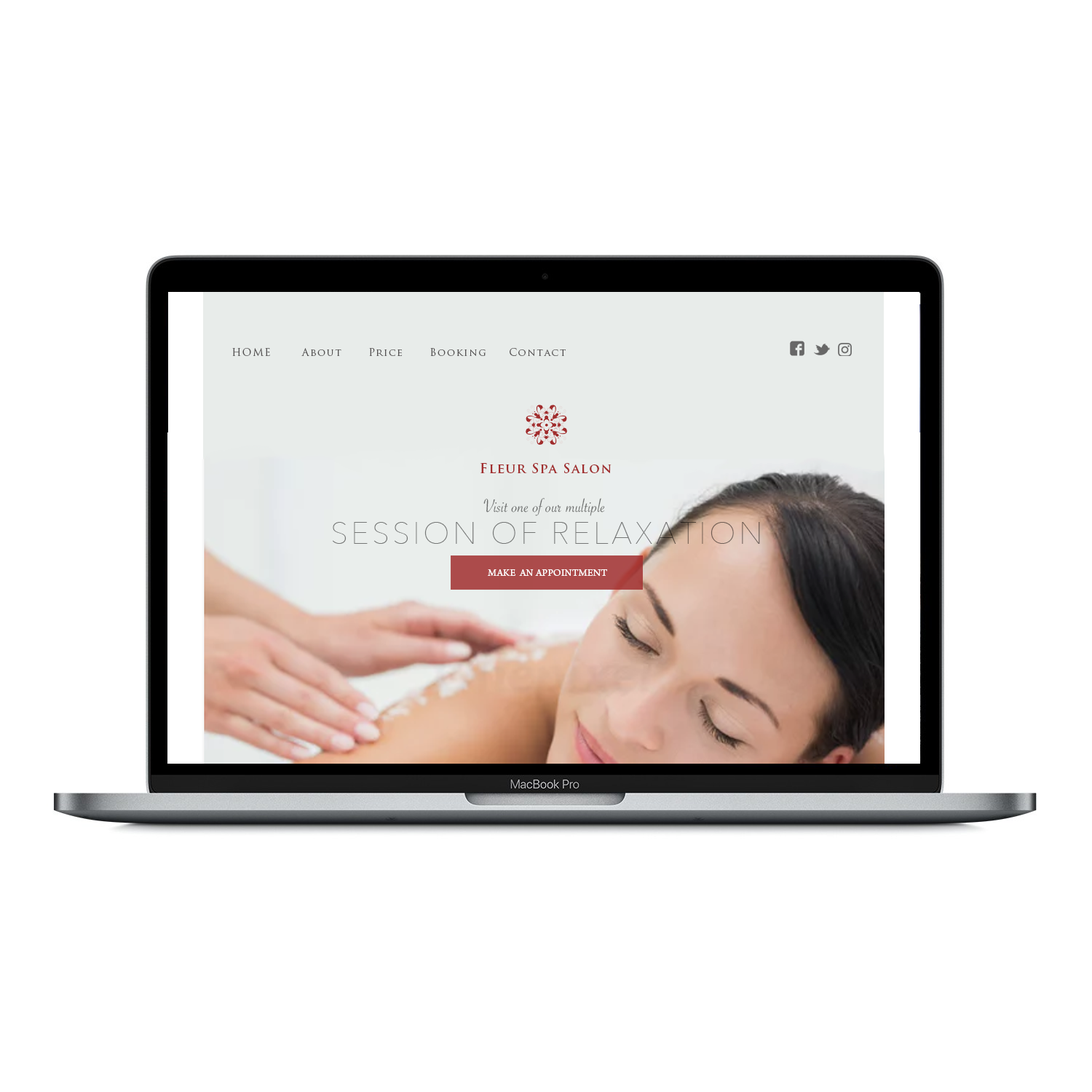
<style>
.page{position:relative;width:1092px;height:1092px;background:#ffffff}
.page>*{position:absolute;margin:0}
.t1{font:10.2px "TrajanPro-Regular";letter-spacing:0.1em;color:#545252}
.t2{font:13.1px "TrajanPro-Bold";letter-spacing:0.075em;color:#a12e2e}
.t3{font:19.7px "SavoyeLetPlain";letter-spacing:0.01em;color:#676968}
.t4{font:30.6px "AvenirNext-UltraLight";letter-spacing:0.1em;color:#757776}
.t5{font:10.2px "ArnoPro-Regular";letter-spacing:0.01em;color:#ffffff}
</style>
<div class="page">
<p class="t1" style="left:232px;top:348px;width:334px;height:8px">HOME       About      Price      Booking     Contact</p>
<p class="t2" style="left:480px;top:463px;width:132px;height:10px">Fleur Spa Salon</p>
<p class="t3" style="left:483px;top:498px;width:122px;height:18px">Visit one of our multiple</p>
<p class="t4" style="left:332px;top:522px;width:428px;height:22px">SESSION OF RELAXATION</p>
<p class="t5" style="left:488px;top:569px;width:119px;height:7px">MAKE  AN APPOINTMENT</p>
</div>
